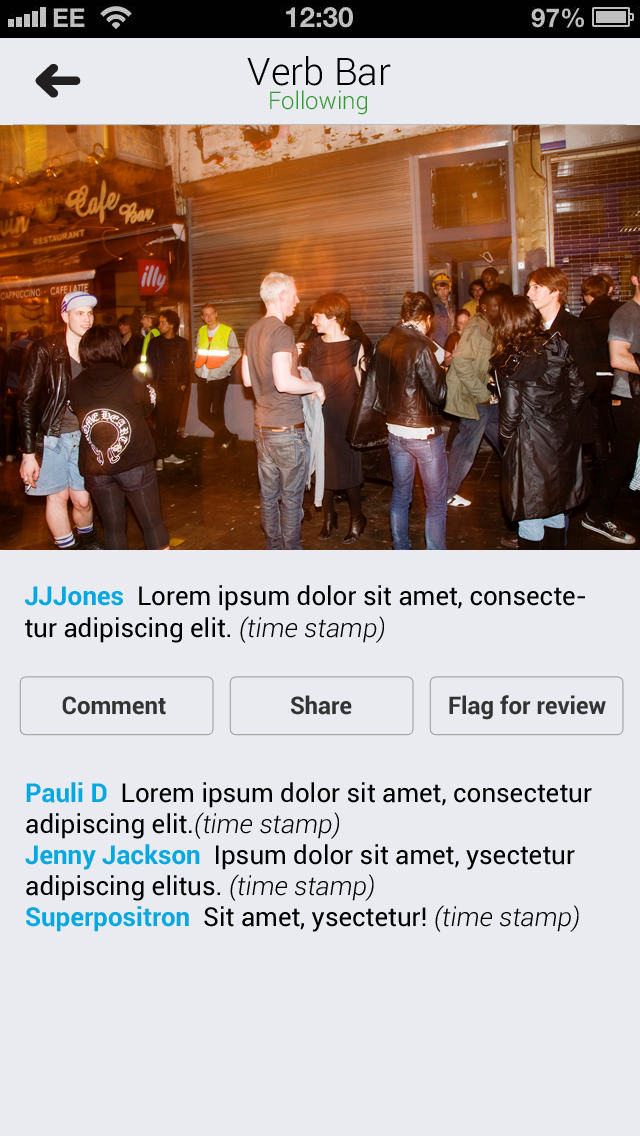
<style>
.page{position:relative;width:640px;height:1136px;background:#e9ebf0}
.page>*{position:absolute;margin:0}
.t1{font:38px "Roboto-Light";color:#000000}
.t2{font:24px "Roboto-Light";color:#339933}
.t3{font:26px "Roboto-Regular";color:#000000}
.t4{font:26px "Roboto-Bold";color:#02a8df}
.t5{font:26px "Roboto-LightItalic";color:#000000}
.t6{font:24px "Roboto-Bold";color:#333333}
</style>
<div class="page">
<p class="t1" style="left:247px;top:56px;width:144px;height:30px">Verb Bar</p>
<p class="t2" style="left:270px;top:90px;width:97px;height:25px">Following</p>
<p class="t3" style="left:25px;top:585px;width:560px;height:58px"><span class="t4">JJJones  </span>Lorem ipsum dolor sit amet, consectetur adipiscing elit. <span class="t5">(time stamp)</span></p>
<p class="t6" style="left:62px;top:696px;width:104px;height:19px">Comment</p>
<p class="t6" style="left:291px;top:695px;width:61px;height:20px">Share</p>
<p class="t6" style="left:449px;top:695px;width:157px;height:25px">Flag for review</p>
<p class="t3" style="left:25px;top:782px;width:567px;height:150px"><span class="t4">Pauli D</span>  Lorem ipsum dolor sit amet, consectetur adipiscing elit.<span class="t5">(time stamp) <br></span><span class="t4">Jenny Jackson</span>  Ipsum dolor sit amet, ysectetur adipiscing elitus. <span class="t5">(time stamp)<br></span><span class="t4">Superpositron</span>  Sit amet, ysectetur! <span class="t5">(time stamp)</span></p>
</div>
